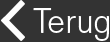
<style>
.page{position:relative;width:110px;height:42px;background:#333333}
.page>*{position:absolute;margin:0}
.t1{font:34px "AkzidenzGroteskBE-Light";color:#fefefe}
</style>
<div class="page">
<p class="t1" style="left:33px;top:8px;width:76px;height:33px">Terug</p>
</div>
